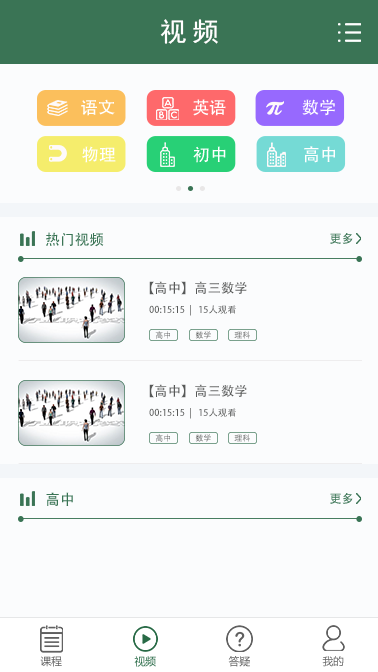
<style>
.page{position:relative;width:378px;height:672px;background:#fbfcfd}
.page>*{position:absolute;margin:0}
.t1{font:26.7px "SimHei";letter-spacing:0.2em;color:#ffffff}
.t2{font:17.2px "AdobeHeitiStd-Regular";color:#ffffff}
.t3{font:14.7px "AdobeHeitiStd-Regular";color:#286a46}
.t4{font:12px "AdobeHeitiStd-Regular";color:#3a7455}
.t5{font:13.3px "AdobeHeitiStd-Regular";color:#575958}
.t6{font:9.3px "AdobeHeitiStd-Regular";color:#575958}
.t7{font:8px "AdobeHeitiStd-Regular"}
.t8{font:10.7px "MicrosoftYaHei";color:#606060}
.t9{font:10.7px "MicrosoftYaHei";color:#286a46}
.t10{font:10.7px "MicrosoftYaHei"}
</style>
<div class="page">
<p class="t1" style="left:160px;top:19px;width:58px;height:25px">视频</p>
<p class="t2" style="left:81px;top:99px;width:34px;height:17px">语文</p>
<p class="t2" style="left:193px;top:99px;width:33px;height:17px">英语</p>
<p class="t2" style="left:302px;top:99px;width:33px;height:17px">数学</p>
<p class="t2" style="left:82px;top:146px;width:34px;height:17px">物理</p>
<p class="t2" style="left:193px;top:146px;width:33px;height:17px">初中</p>
<p class="t2" style="left:304px;top:146px;width:31px;height:17px">高中</p>
<p class="t3" style="left:46px;top:232px;width:58px;height:15px">热门视频</p>
<p class="t4" style="left:330px;top:233px;width:23px;height:11px">更多</p>
<p class="t5" style="left:149px;top:281px;width:98px;height:14px">【高中】高三数学</p>
<p class="t6" style="left:149px;top:305px;width:87px;height:11px">00:15:15  |   15人观看</p>
<p class="t7" style="left:155px;top:331px;width:15px;height:8px">高中</p>
<p class="t7" style="left:195px;top:331px;width:16px;height:8px">数学</p>
<p class="t7" style="left:234px;top:331px;width:16px;height:8px">理科</p>
<p class="t5" style="left:149px;top:384px;width:98px;height:14px">【高中】高三数学</p>
<p class="t6" style="left:149px;top:408px;width:87px;height:11px">00:15:15  |   15人观看</p>
<p class="t7" style="left:155px;top:434px;width:15px;height:8px">高中</p>
<p class="t7" style="left:195px;top:434px;width:16px;height:8px">数学</p>
<p class="t7" style="left:234px;top:434px;width:16px;height:8px">理科</p>
<p class="t3" style="left:46px;top:492px;width:27px;height:14px">高中</p>
<p class="t4" style="left:330px;top:493px;width:23px;height:11px">更多</p>
<p class="t8" style="left:40px;top:656px;width:22px;height:11px">课程</p>
<p class="t9" style="left:134px;top:656px;width:22px;height:11px">视频</p>
<p class="t10" style="left:228px;top:656px;width:22px;height:11px">答疑</p>
<p class="t8" style="left:322px;top:656px;width:22px;height:11px">我的</p>
</div>
